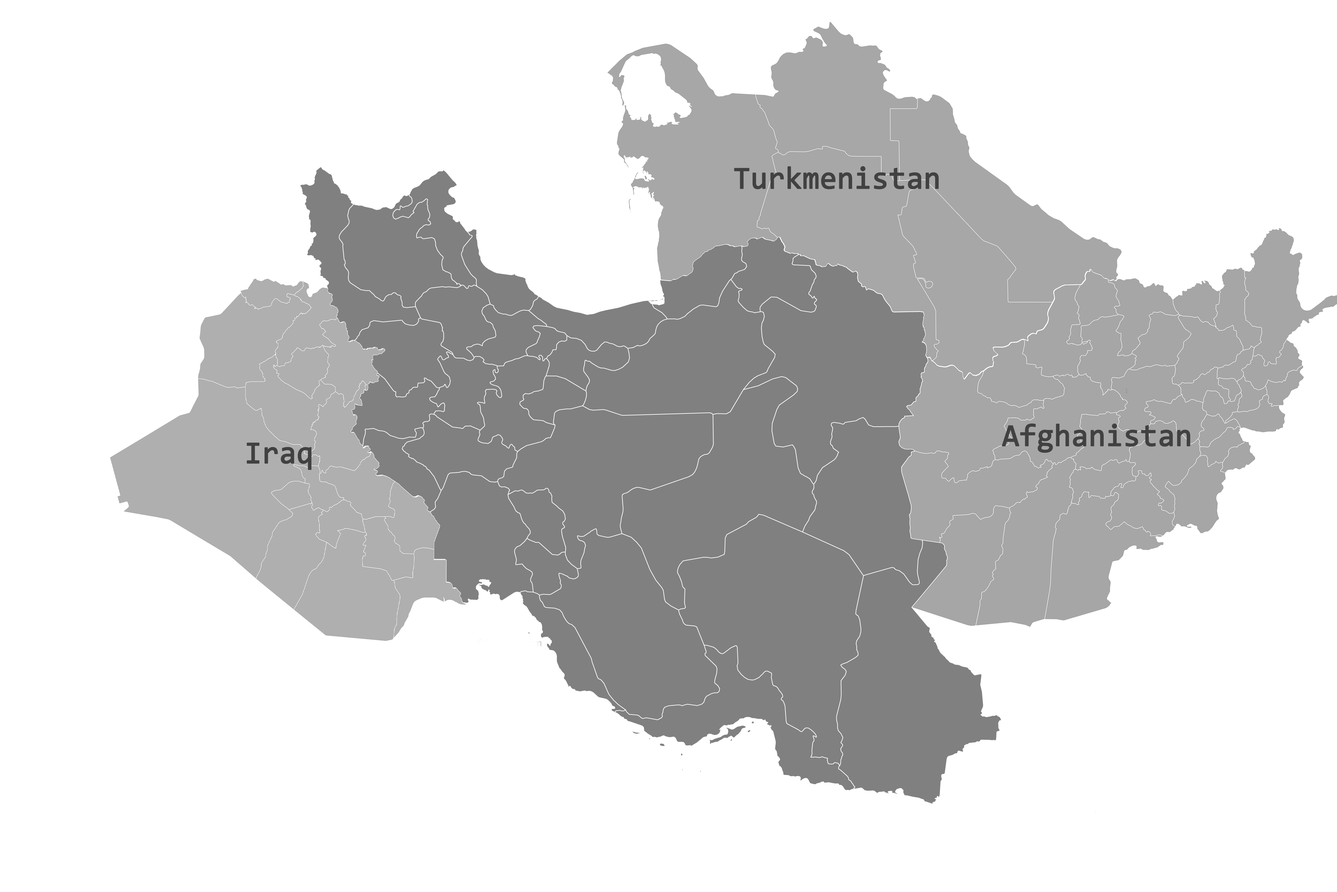
<style>
.page{position:relative;width:1337px;height:892px;background:#ffffff}
.page>*{position:absolute;margin:0}
.t1{font:31.5px "Consolas";letter-spacing:-0.015em;color:#414141;font-weight:bold}
</style>
<div class="page">
<p class="t1" style="left:734px;top:166px;width:205px;height:23px">Turkmenistan</p>
<p class="t1" style="left:1002px;top:423px;width:189px;height:30px">Afghanistan</p>
<p class="t1" style="left:247px;top:442px;width:65px;height:28px">Iraq</p>
</div>
